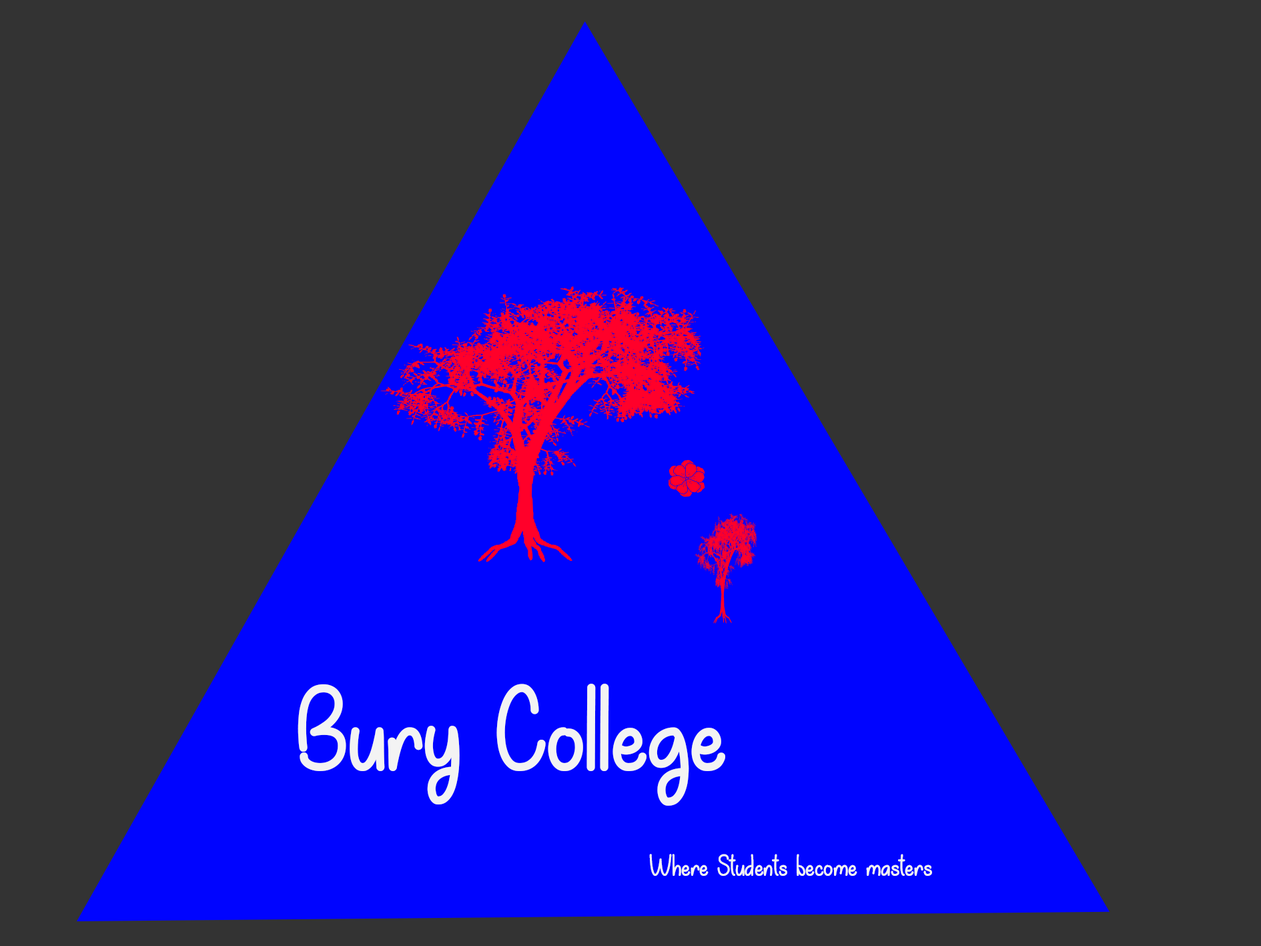
<style>
.page{position:relative;width:1261px;height:946px;background:#333333}
.page>*{position:absolute;margin:0}
.t1{font:133.5px "MyHappyEnding-Regular";color:#f3f3f3}
.t2{font:33.4px "MyHappyEnding-Regular";color:#f3f3f3}
</style>
<div class="page">
<p class="t1" style="left:298px;top:683px;width:427px;height:122px">Bury College</p>
<p class="t2" style="left:649px;top:853px;width:283px;height:22px">Where Students become masters</p>
</div>
